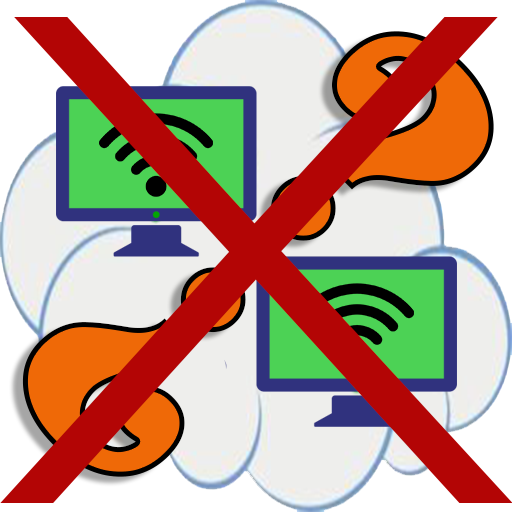
<style>
.page{position:relative;width:512px;height:512px}
.page>*{position:absolute;margin:0}
.t1{font:711.2px "Humanist521BT-Light";color:#b30505;scale:1.04 1}
.t2{font:350px "ClarendonBT-Black"}
</style>
<div class="page">
<p class="t1" style="left:0px;top:17px;width:513px;height:486px">X</p>
<p class="t2" style="left:270px;top:31px;width:224px;height:210px;rotate:45deg">?</p>
<p class="t2" style="left:22px;top:267px;width:224px;height:210px;rotate:-135deg">?</p>
</div>
